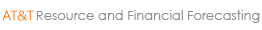
<style>
.page{position:relative;width:262px;height:30px;background:#ffffff}
.page>*{position:absolute;margin:0}
.t1{font:13px "CenturyGothic";color:#909090}
</style>
<div class="page">
<p class="t1" style="left:36px;top:10px;width:224px;height:13px">Resource and Financial Forecasting</p>
</div>
